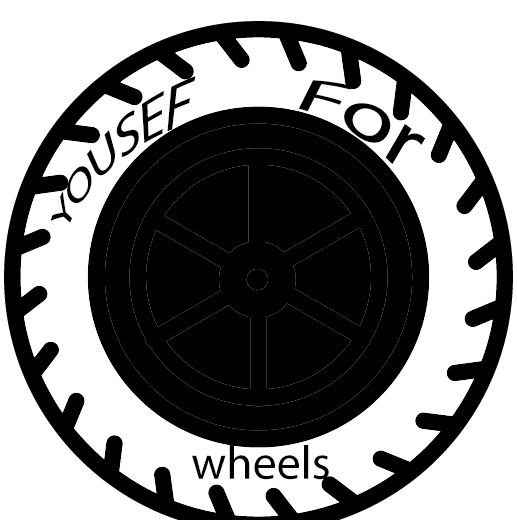
<style>
.page{position:relative;width:517px;height:520px;background:#ffffff}
.page>*{position:absolute;margin:0}
.t1{font:105.4px "MyriadArabic-Regular";color:#000000}
.t2{font:66.7px "MyriadArabic-Regular";color:#000000}
</style>
<div class="page">
<p class="t1" style="left:298px;top:80px;width:128px;height:84px;rotate:28deg">For</p>
<p class="t2" style="left:192px;top:445px;width:137px;height:35px">wheels</p>
</div>
